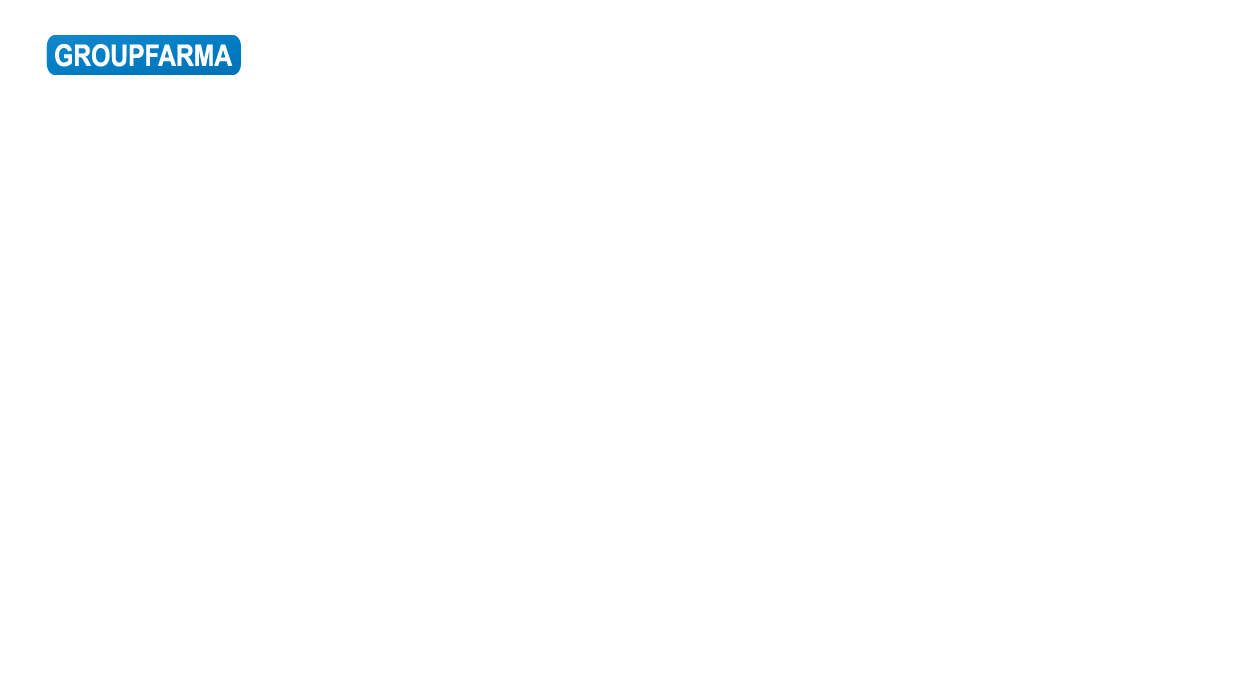
<style>
.page{position:relative;width:1260px;height:700px;background:#ffffff}
.page>*{position:absolute;margin:0}
.t1{font:30px "Arial-BoldMT";letter-spacing:-0.01em;color:#fefefe;scale:0.83 1}
</style>
<div class="page">
<p class="t1" style="left:55px;top:44px;width:178px;height:23px">GROUPFARMA</p>
</div>
